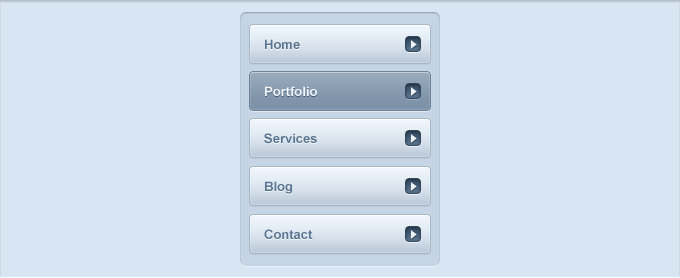
<style>
.page{position:relative;width:680px;height:278px;background:#d8e5f2}
.page>*{position:absolute;margin:0}
.t1{font:13px "Arial-BoldMT";color:#597490}
.t2{font:13px "Arial-BoldMT";color:#f3f9ff}
</style>
<div class="page">
<p class="t1" style="left:265px;top:39px;width:35px;height:10px">Home</p>
<p class="t2" style="left:265px;top:86px;width:52px;height:10px">Portfolio</p>
<p class="t1" style="left:264px;top:133px;width:53px;height:11px">Services</p>
<p class="t1" style="left:265px;top:181px;width:27px;height:13px">Blog</p>
<p class="t1" style="left:264px;top:229px;width:49px;height:10px">Contact</p>
</div>
